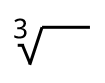
<style>
.page{position:relative;width:105px;height:83px;background:#ffffff}
.page>*{position:absolute;margin:0}
.t1{font:27.2px "DroidSans";color:#000000}
</style>
<div class="page">
<p class="t1" style="left:14px;top:18px;width:13px;height:21px">3</p>
</div>
